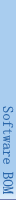
<style>
.page{position:relative;width:16px;height:200px;background:#a9cdef}
.page>*{position:absolute;margin:0}
.t1{font:14.7px "SimSun";color:#2b67aa}
</style>
<div class="page">
<p class="t1" style="left:3px;top:106px;width:11px;height:88px">Software BOM</p>
</div>
